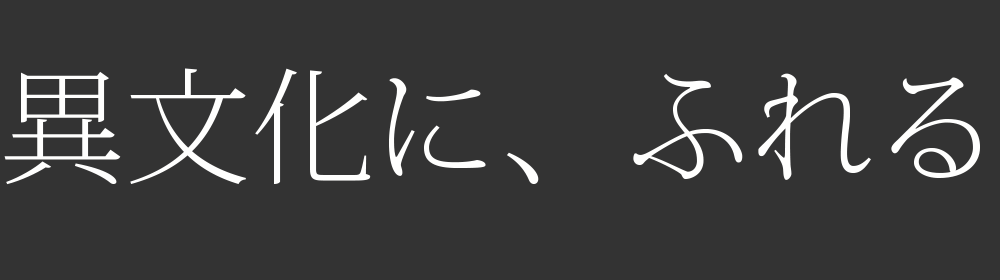
<style>
.page{position:relative;width:1000px;height:280px;background:#333333}
.page>*{position:absolute;margin:0}
.t1{font:125px "KozMinPr6N-ExtraLight";color:#fffffe}
</style>
<div class="page">
<p class="t1" style="left:4px;top:68px;width:976px;height:117px">異文化に、ふれる</p>
</div>
